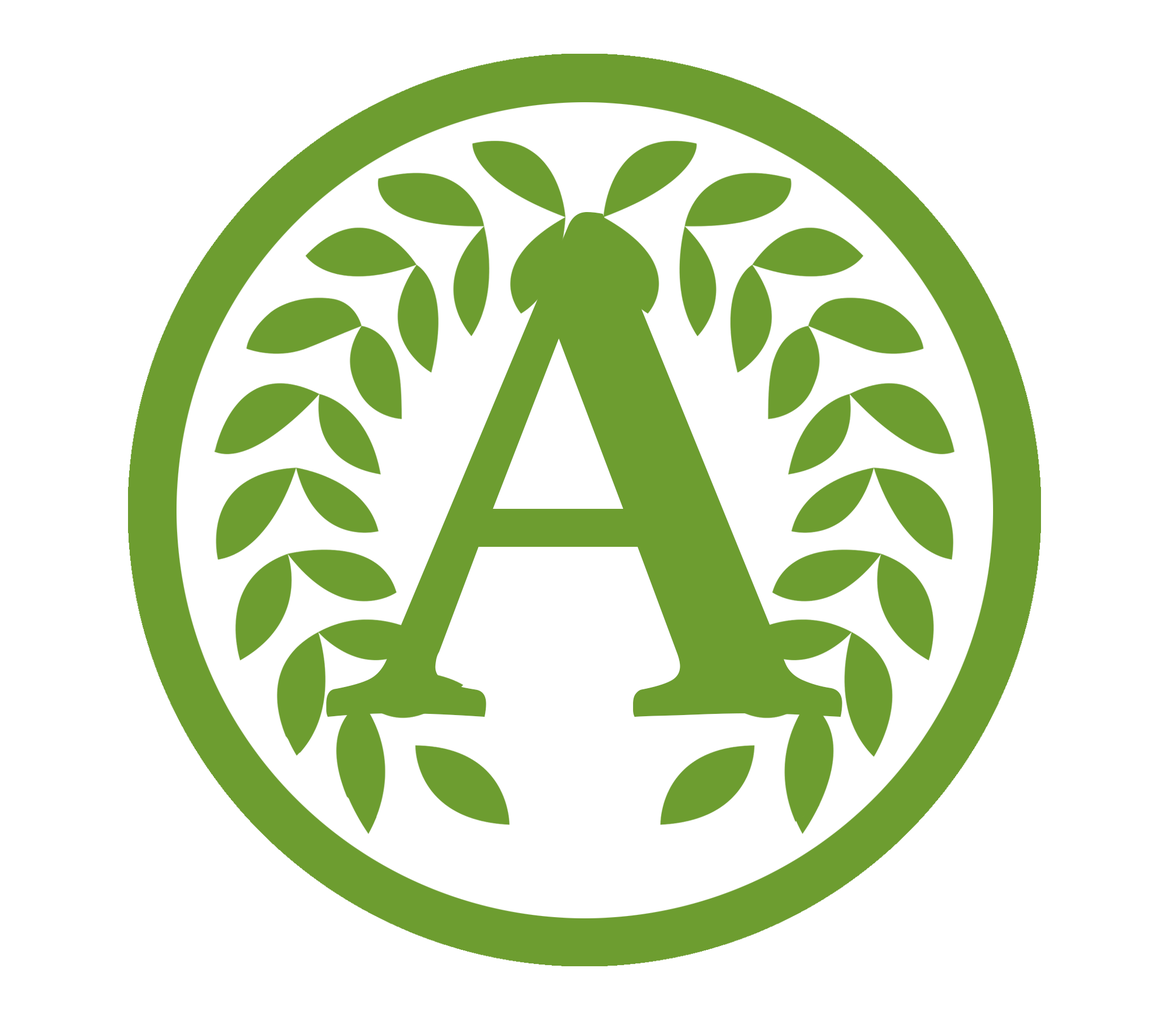
<style>
.page{position:relative;width:1169px;height:1020px;background:#ffffff}
.page>*{position:absolute;margin:0}
.t1{font:757.3px "Athelas-Bold";color:#6d9d30}
</style>
<div class="page">
<p class="t1" style="left:326px;top:212px;width:516px;height:505px">A</p>
</div>
